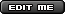
<style>
.page{position:relative;width:65px;height:14px}
.page>*{position:absolute;margin:0}
.t1{font:8px "04b09";color:#fdfdfd}
</style>
<div class="page">
<p class="t1" style="left:9px;top:5px;width:44px;height:5px">EDIT ME</p>
</div>
